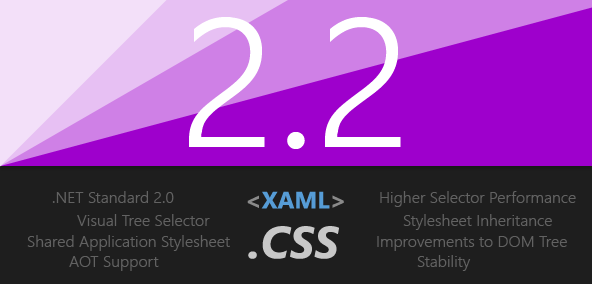
<style>
.page{position:relative;width:592px;height:284px;background:#1e1e1e}
.page>*{position:absolute;margin:0}
.t1{font:182px "SegoeUI-Semilight";color:#ffffff}
.t2{font:16px "SegoeUI-Semilight";color:#626262}
</style>
<div class="page">
<p class="t1" style="left:189px;top:17px;width:212px;height:132px">2.2</p>
<p class="t2" style="left:52px;top:191px;width:122px;height:12px">.NET Standard 2.0</p>
<p class="t2" style="left:380px;top:191px;width:196px;height:16px">Higher Selector Performance</p>
<p class="t2" style="left:77px;top:214px;width:133px;height:12px">Visual Tree Selector</p>
<p class="t2" style="left:403px;top:214px;width:149px;height:16px">Stylesheet Inheritance</p>
<p class="t2" style="left:27px;top:235px;width:203px;height:16px">Shared Application Stylesheet</p>
<p class="t2" style="left:377px;top:236px;width:190px;height:15px">Improvements to DOM Tree</p>
<p class="t2" style="left:69px;top:256px;width:90px;height:15px">AOT Support</p>
<p class="t2" style="left:417px;top:255px;width:54px;height:16px">Stability</p>
</div>
